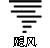
<style>
.page{position:relative;width:50px;height:48px;background:#ffffff}
.page>*{position:absolute;margin:0}
.t1{font:12px "OPPOSans-R";color:#000000}
</style>
<div class="page">
<p class="t1" style="left:13px;top:36px;width:24px;height:11px">飓风</p>
</div>
